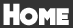
<style>
.page{position:relative;width:73px;height:28px;background:#333333}
.page>*{position:absolute;margin:0}
.t1{font:29.2px "QUARTZOdemo-Bold";letter-spacing:0.005em;color:#ffffff}
</style>
<div class="page">
<p class="t1" style="left:3px;top:3px;width:66px;height:23px">Home</p>
</div>
